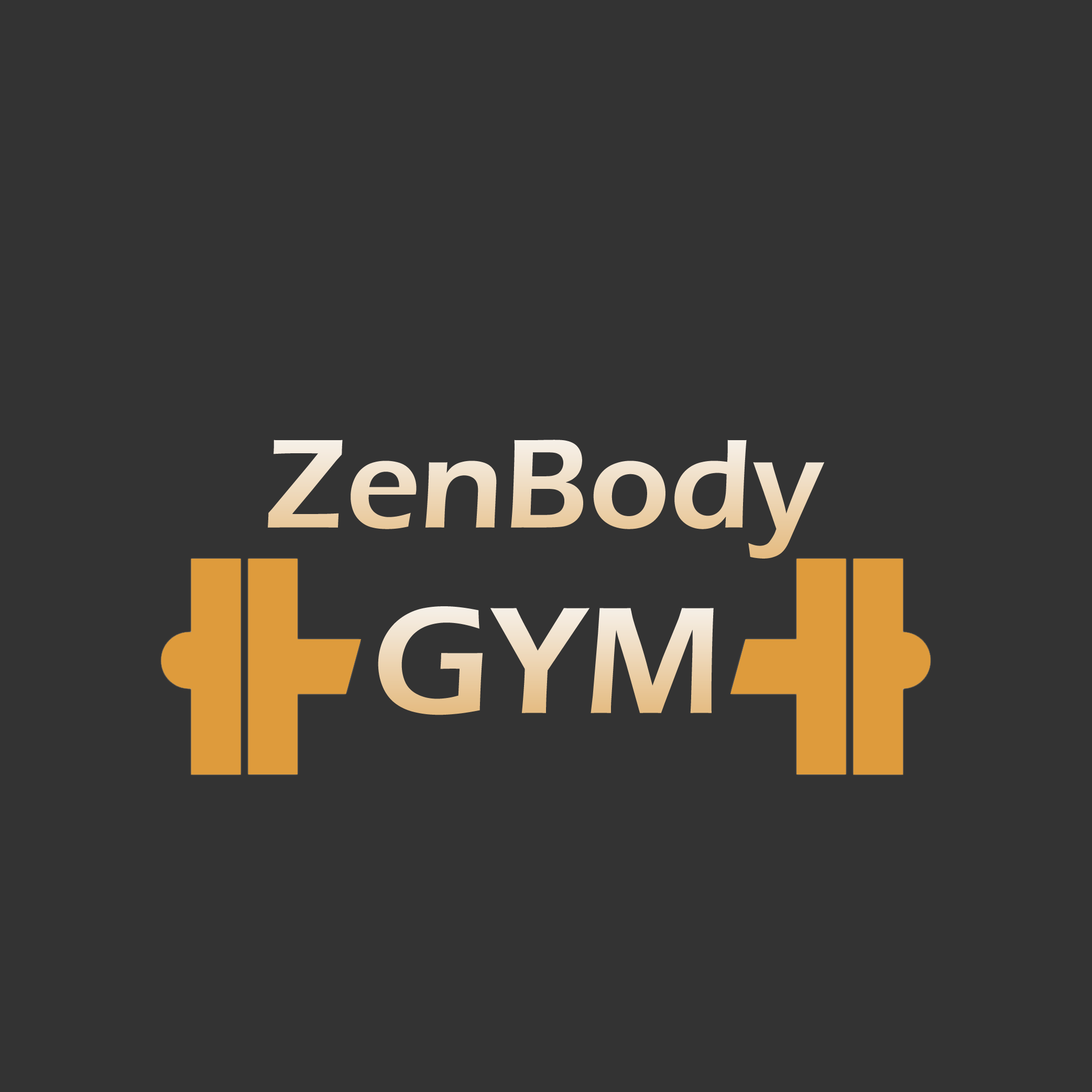
<style>
.page{position:relative;width:1092px;height:1092px;background:#333333}
.page>*{position:absolute;margin:0}
.t1{font:131px "ErasITC-Demi"}
.t2{font:157.2px "ErasITC-Demi"}
</style>
<div class="page">
<p class="t1" style="left:268px;top:440px;width:556px;height:119px">ZenBody</p>
<p class="t2" style="left:378px;top:606px;width:336px;height:109px">GYM</p>
</div>
